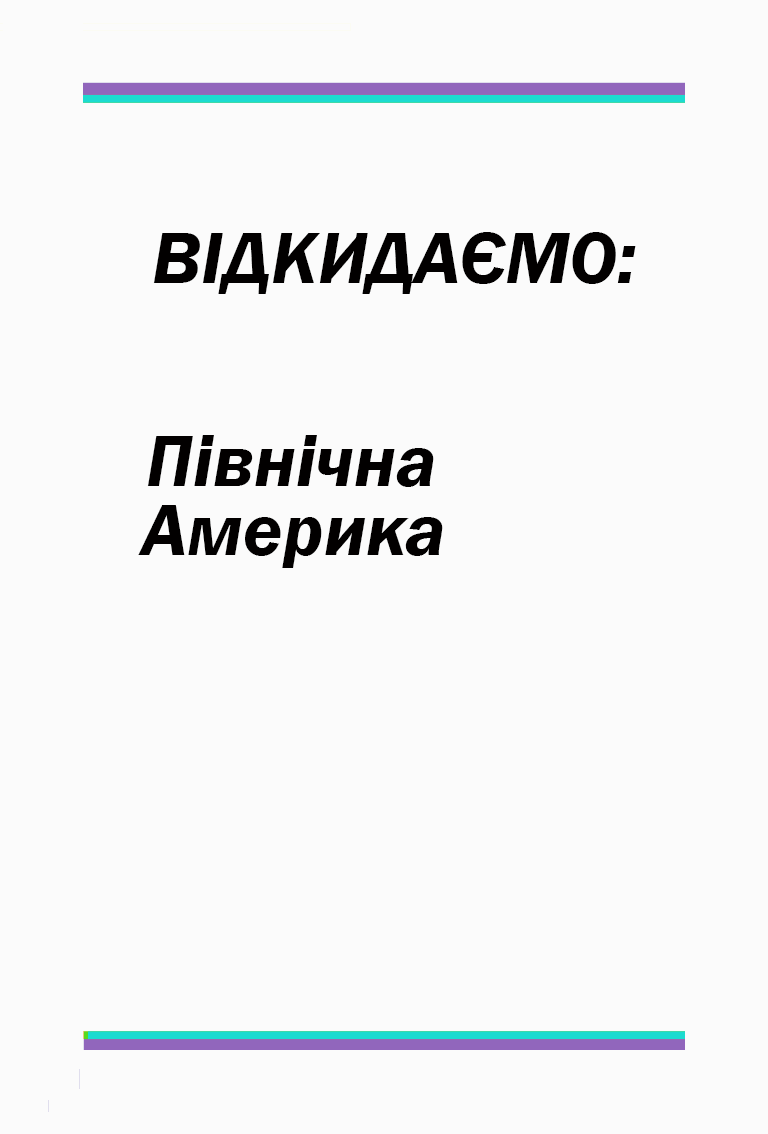
<style>
.page{position:relative;width:768px;height:1134px;background:#fbfbfb}
.page>*{position:absolute;margin:0}
.t1{font:75px "FranklinGothic-DemiItalic";color:#020000}
</style>
<div class="page">
<p class="t1" style="left:153px;top:232px;width:483px;height:62px">ВІДКИДАЄМО:</p>
<p class="t1" style="left:147px;top:435px;width:287px;height:52px">Північна</p>
<p class="t1" style="left:138px;top:505px;width:305px;height:63px">Америка</p>
</div>
